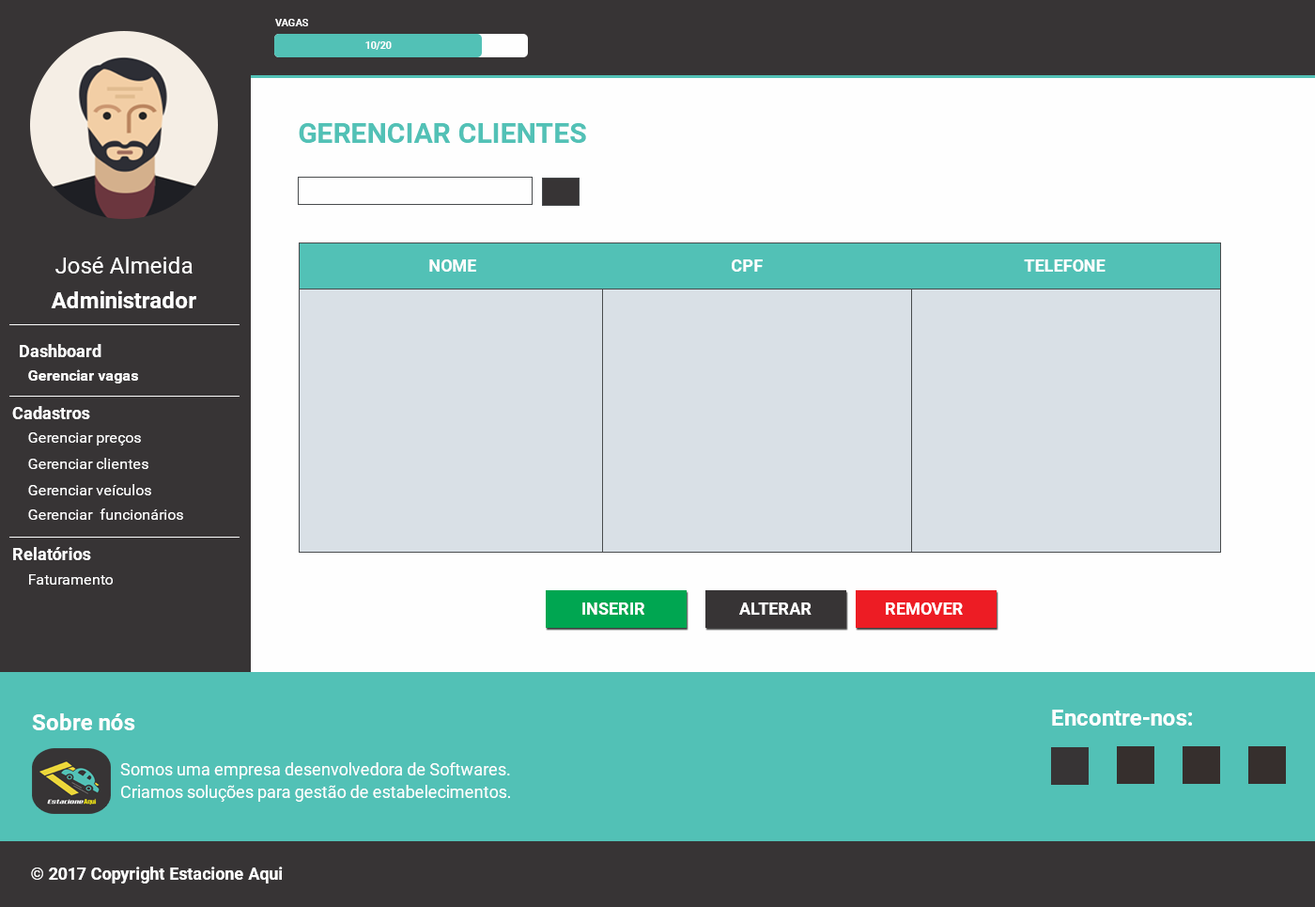
<style>
.page{position:relative;width:1315px;height:907px;background:#fefefe}
.page>*{position:absolute;margin:0}
.t1{font:10.3px "Roboto-Bold";color:#fefefe;text-transform:uppercase}
.t2{font:10.3px "Roboto-Bold";color:#fefefe}
.t3{font:28.2px "Roboto-Bold";color:#52c1b6;text-transform:uppercase}
.t4{font:22.5px "Roboto-Regular";color:#fefefe}
.t5{font:16.9px "Roboto-Bold";color:#fefefe;text-transform:uppercase}
.t6{font:22.5px "Roboto-Bold";color:#fefefe}
.t7{font:16.9px "Roboto-Bold";color:#fefefe}
.t8{font:15px "Roboto-Bold";color:#fefefe}
.t9{font:15px "Roboto-Regular";color:#fefefe}
.t10{font:16.9px/22.5px "Roboto-Regular";color:#fefefe}
</style>
<div class="page">
<p class="t1" style="left:275px;top:19px;width:33px;height:7px">Vagas</p>
<p class="t2" style="left:365px;top:41px;width:27px;height:9px">10/20</p>
<p class="t3" style="left:299px;top:123px;width:287px;height:20px">gerenciar clientes</p>
<p class="t4" style="left:55px;top:256px;width:138px;height:17px">José Almeida</p>
<p class="t5" style="left:429px;top:259px;width:47px;height:13px">nOME</p>
<p class="t5" style="left:732px;top:259px;width:31px;height:13px">CPF</p>
<p class="t5" style="left:1024px;top:259px;width:82px;height:13px">TELEFONE</p>
<p class="t6" style="left:51px;top:290px;width:145px;height:18px">Administrador</p>
<p class="t7" style="left:20px;top:344px;width:81px;height:13px">Dashboard</p>
<p class="t8" style="left:28px;top:369px;width:110px;height:14px">Gerenciar vagas</p>
<p class="t7" style="left:12px;top:406px;width:78px;height:13px">Cadastros</p>
<p class="t9" style="left:28px;top:432px;width:113px;height:13px">Gerenciar preços</p>
<p class="t9" style="left:28px;top:458px;width:120px;height:11px">Gerenciar clientes</p>
<p class="t9" style="left:28px;top:484px;width:123px;height:11px">Gerenciar veículos</p>
<p class="t9" style="left:28px;top:508px;width:155px;height:12px">Gerenciar  funcionários</p>
<p class="t7" style="left:13px;top:547px;width:78px;height:13px">Relatórios</p>
<p class="t9" style="left:29px;top:574px;width:84px;height:10px">Faturamento</p>
<p class="t5" style="left:582px;top:602px;width:62px;height:12px">INSERIR</p>
<p class="t5" style="left:739px;top:602px;width:73px;height:12px">ALTERAR</p>
<p class="t5" style="left:886px;top:602px;width:77px;height:12px">REMOVER</p>
<p class="t6" style="left:32px;top:713px;width:103px;height:17px">Sobre nós</p>
<p class="t6" style="left:1052px;top:709px;width:140px;height:16px">Encontre-nos:</p>
<p class="t10" style="left:120px;top:762px;width:390px;height:39px">Somos uma empresa desenvolvedora de Softwares. Criamos soluções para gestão de estabelecimentos.</p>
<p class="t7" style="left:31px;top:866px;width:252px;height:17px">© 2017 Copyright Estacione Aqui</p>
</div>
